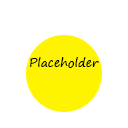
<style>
.page{position:relative;width:128px;height:128px;background:#ffffff}
.page>*{position:absolute;margin:0}
.t1{font:12px "SegoePrint";color:#000000}
</style>
<div class="page">
<p class="t1" style="left:30px;top:57px;width:69px;height:11px">Placeholder</p>
</div>
